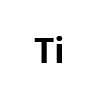
<style>
.page{position:relative;width:100px;height:100px;background:#ffffff}
.page>*{position:absolute;margin:0}
.t1{font:35px "OpenSans-Bold";color:#000000}
</style>
<div class="page">
<p class="t1" style="left:34px;top:36px;width:29px;height:27px">Ti</p>
</div>
